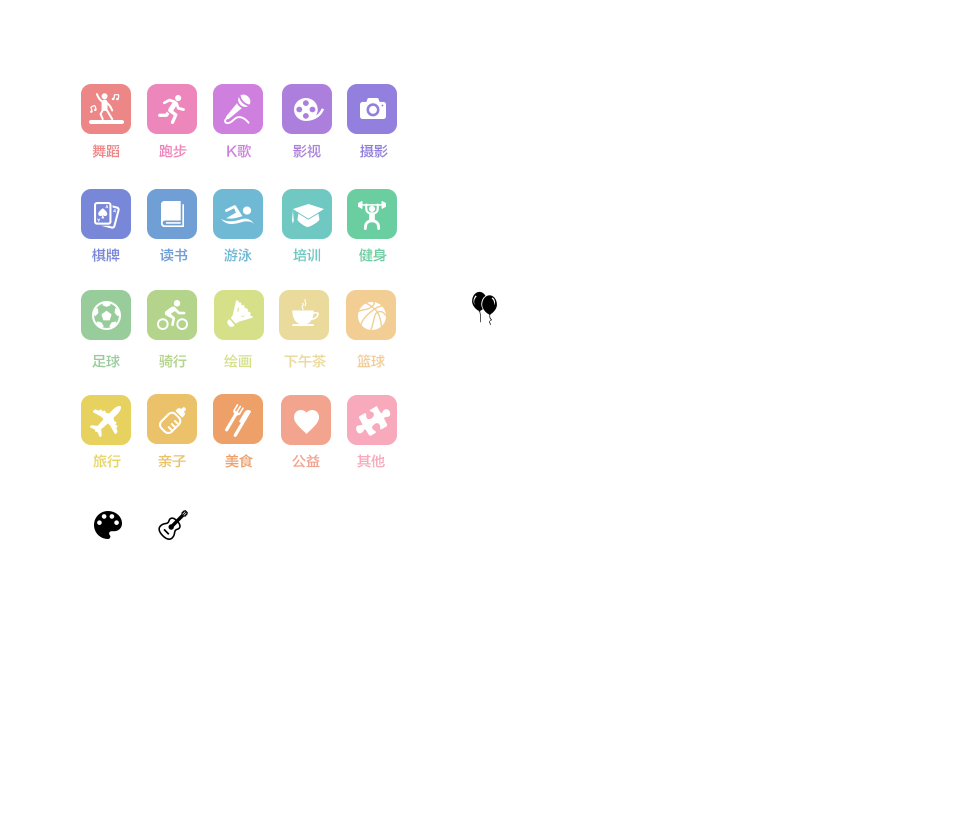
<style>
.page{position:relative;width:960px;height:827px;background:#ffffff}
.page>*{position:absolute;margin:0}
.t1{font:14px "FZLTZHK--GBK1-0";color:#ed8686}
.t2{font:14px "FZLTZHK--GBK1-0";color:#ed86bb}
.t3{font:14px "FZLTZHK--GBK1-0";color:#cf7fdd}
.t4{font:14px "FZLTZHK--GBK1-0";color:#ad7fdd}
.t5{font:14px "FZLTZHK--GBK1-0";color:#937fdd}
.t6{font:14px "FZLTZHK--GBK1-0";color:#7887d7}
.t7{font:14px "FZLTZHK--GBK1-0";color:#6f9fd4}
.t8{font:14px "FZLTZHK--GBK1-0";color:#6fb9d4}
.t9{font:14px "FZLTZHK--GBK1-0";color:#6fc8c1}
.t10{font:14px "FZLTZHK--GBK1-0";color:#6bcea1}
.t11{font:14px "FZLTZHK--GBK1-0";color:#99cc9b}
.t12{font:14px "FZLTZHK--GBK1-0";color:#b4d48b}
.t13{font:14px "FZLTZHK--GBK1-0";color:#d5e089}
.t14{font:14px "FZLTZHK--GBK1-0";color:#eadb9d}
.t15{font:14px "FZLTZHK--GBK1-0";color:#f3ce94}
.t16{font:14px "FZLTZHK--GBK1-0";color:#e7d660}
.t17{font:14px "FZLTZHK--GBK1-0";color:#ebc26a}
.t18{font:14px "FZLTZHK--GBK1-0";color:#eda169}
.t19{font:14px "FZLTZHK--GBK1-0";color:#f3a48f}
.t20{font:14px "FZLTZHK--GBK1-0";color:#f8a9bc}
</style>
<div class="page">
<p class="t1" style="left:92px;top:144px;width:28px;height:14px">舞蹈</p>
<p class="t2" style="left:159px;top:144px;width:28px;height:14px">跑步</p>
<p class="t3" style="left:227px;top:144px;width:24px;height:14px">K歌</p>
<p class="t4" style="left:293px;top:144px;width:28px;height:14px">影视</p>
<p class="t5" style="left:360px;top:144px;width:28px;height:14px">摄影</p>
<p class="t6" style="left:92px;top:248px;width:28px;height:14px">棋牌</p>
<p class="t7" style="left:160px;top:248px;width:28px;height:14px">读书</p>
<p class="t8" style="left:224px;top:248px;width:28px;height:14px">游泳</p>
<p class="t9" style="left:293px;top:248px;width:28px;height:14px">培训</p>
<p class="t10" style="left:359px;top:248px;width:28px;height:14px">健身</p>
<p class="t11" style="left:92px;top:354px;width:28px;height:14px">足球</p>
<p class="t12" style="left:159px;top:354px;width:28px;height:14px">骑行</p>
<p class="t13" style="left:224px;top:354px;width:28px;height:14px">绘画</p>
<p class="t14" style="left:284px;top:354px;width:42px;height:14px">下午茶</p>
<p class="t15" style="left:357px;top:354px;width:28px;height:14px">篮球</p>
<p class="t16" style="left:93px;top:454px;width:28px;height:14px">旅行</p>
<p class="t17" style="left:158px;top:454px;width:28px;height:14px">亲子</p>
<p class="t18" style="left:225px;top:454px;width:28px;height:14px">美食</p>
<p class="t19" style="left:292px;top:454px;width:28px;height:14px">公益</p>
<p class="t20" style="left:357px;top:454px;width:28px;height:14px">其他</p>
</div>
